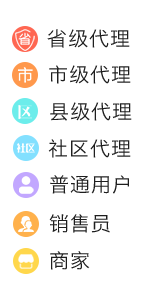
<style>
.page{position:relative;width:150px;height:294px;background:#ffffff}
.page>*{position:absolute;margin:0}
.t1{font:20px "HiraginoSansGB-W3";letter-spacing:0.05em;color:#1e1e1e}
</style>
<div class="page">
<p class="t1" style="left:47px;top:29px;width:83px;height:19px">省级代理</p>
<p class="t1" style="left:49px;top:65px;width:82px;height:19px">市级代理</p>
<p class="t1" style="left:50px;top:102px;width:82px;height:19px">县级代理</p>
<p class="t1" style="left:48px;top:139px;width:83px;height:19px">社区代理</p>
<p class="t1" style="left:50px;top:175px;width:79px;height:19px">普通用户</p>
<p class="t1" style="left:49px;top:214px;width:61px;height:19px">销售员</p>
<p class="t1" style="left:50px;top:251px;width:40px;height:19px">商家</p>
</div>
